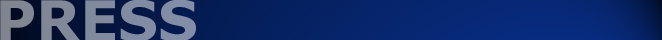
<style>
.page{position:relative;width:662px;height:40px}
.page>*{position:absolute;margin:0}
.t1{font:56px "Verdana-Bold";letter-spacing:-0.005em;color:#81899d}
</style>
<div class="page">
<p class="t1" style="left:0px;top:0px;width:196px;height:42px">PRESS</p>
</div>
